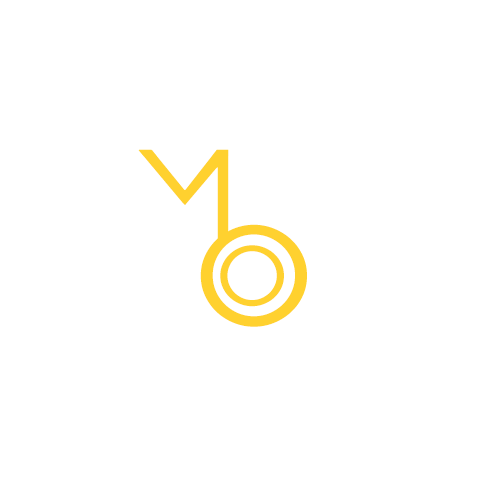
<style>
.page{position:relative;width:500px;height:500px;background:#ffffff}
.page>*{position:absolute;margin:0}
.t1{font:91.9px "PROMETHEUS";color:#ffd12f;scale:1.03 1}
.t2{font:100px "PROMETHEUS";color:#ffd12f}
.t3{font:60px "PROMETHEUS";color:#ffd12f}
</style>
<div class="page">
<p class="t1" style="left:138px;top:149px;width:91px;height:93px">M</p>
<p class="t2" style="left:200px;top:224px;width:107px;height:103px">O</p>
<p class="t3" style="left:220px;top:245px;width:64px;height:62px">O</p>
</div>
